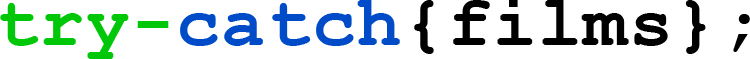
<style>
.page{position:relative;width:750px;height:59px;background:#ffffff}
.page>*{position:absolute;margin:0}
.t1{font:73px "CourierNewPS-BoldMT";letter-spacing:0.02em;color:#000000}
.t2{font:73px "CourierNewPS-BoldMT";letter-spacing:0.02em;color:#00c809}
.t3{font:73px "CourierNewPS-BoldMT";letter-spacing:0.02em;color:#004bc8}
</style>
<div class="page">
<p class="t1" style="left:0px;top:0px;width:750px;height:59px"><span class="t2">try-</span><span class="t3">catch</span>{films};</p>
</div>
